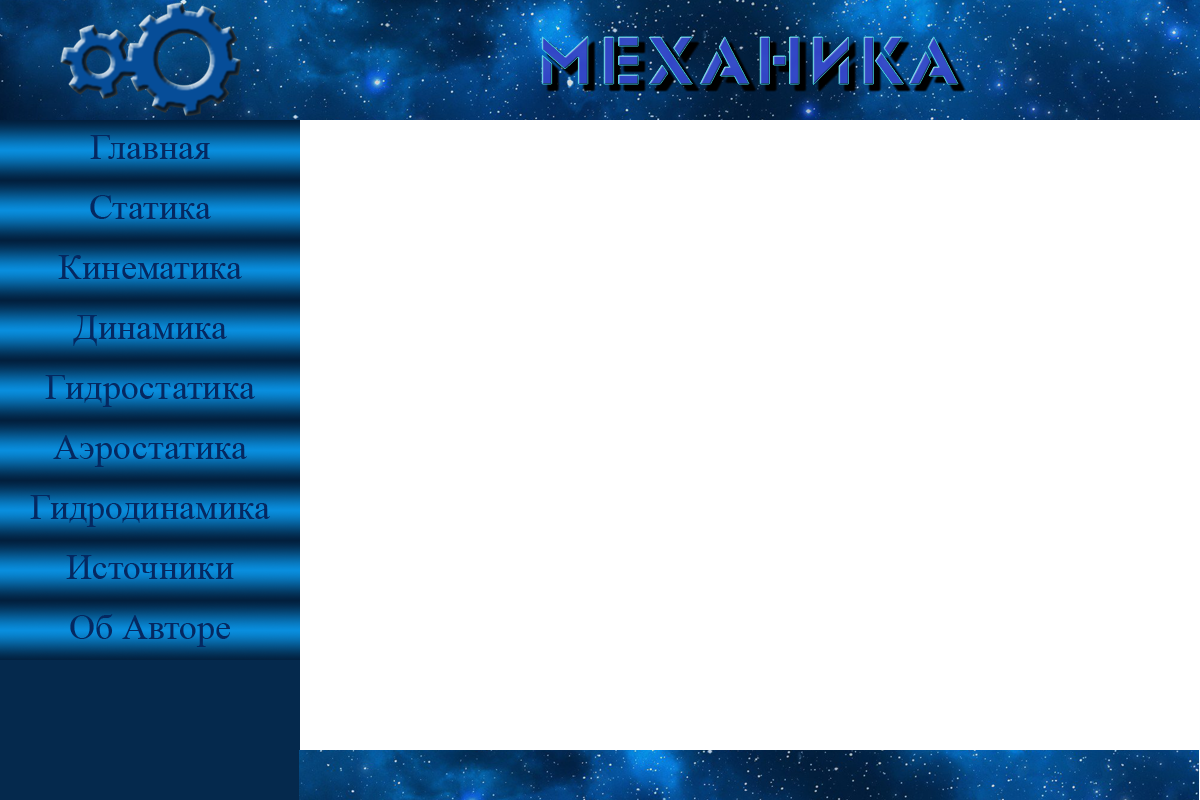
<style>
.page{position:relative;width:1200px;height:800px;background:#ffffff}
.page>*{position:absolute;margin:0}
.t1{font:72px "Glasten";color:#3349c7}
.t2{font:36px "TimesNewRomanPSMT";color:#052860}
</style>
<div class="page">
<p class="t1" style="left:542px;top:36px;width:416px;height:49px">меХАНИКА</p>
<p class="t2" style="left:90px;top:135px;width:120px;height:24px">Главная</p>
<p class="t2" style="left:90px;top:195px;width:121px;height:24px">Статика</p>
<p class="t2" style="left:58px;top:255px;width:184px;height:24px">Кинематика</p>
<p class="t2" style="left:73px;top:315px;width:154px;height:31px">Динамика</p>
<p class="t2" style="left:45px;top:375px;width:210px;height:32px">Гидростатика</p>
<p class="t2" style="left:53px;top:435px;width:194px;height:32px">Аэростатика</p>
<p class="t2" style="left:30px;top:495px;width:240px;height:32px">Гидродинамика</p>
<p class="t2" style="left:66px;top:555px;width:168px;height:24px">Источники</p>
<p class="t2" style="left:70px;top:614px;width:160px;height:33px">Об Авторе</p>
</div>
